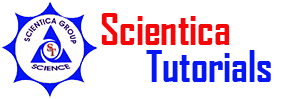
<style>
.page{position:relative;width:282px;height:99px;background:#ffffff}
.page>*{position:absolute;margin:0}
.t1{font:41.7px "AgencyFB-Bold";color:#f60606}
.t2{font:41.7px "AgencyFB-Bold";color:#0617f6}
</style>
<div class="page">
<p class="t1" style="left:101px;top:13px;width:129px;height:32px">Scientica</p>
<p class="t2" style="left:146px;top:50px;width:125px;height:32px">Tutorials</p>
</div>
